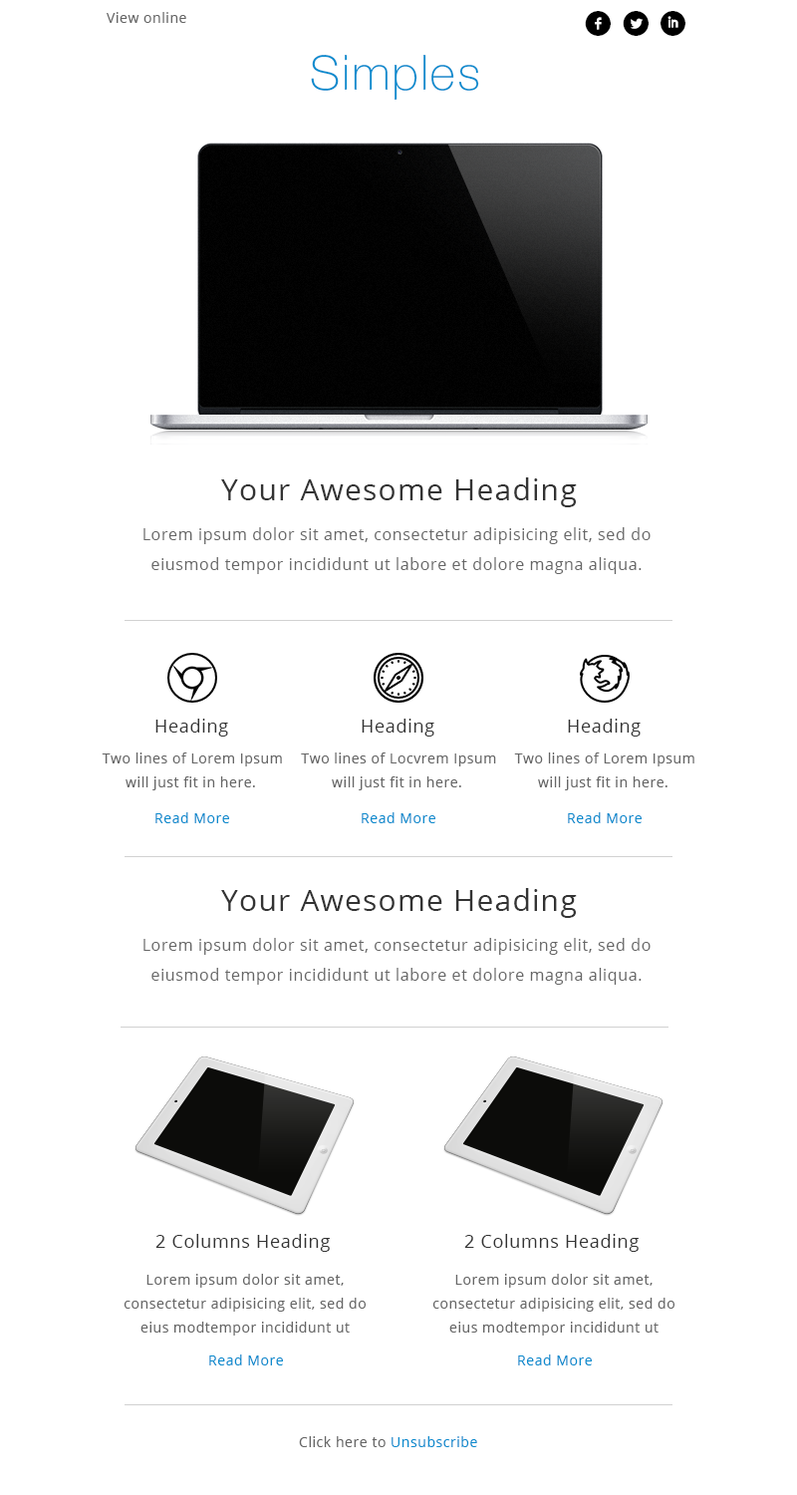
<style>
.page{position:relative;width:797px;height:1495px;background:#ffffff}
.page>*{position:absolute;margin:0}
.t1{font:14px "OpenSans";letter-spacing:0.04em;color:#666666}
.t2{font:35.9px "Socialico";letter-spacing:0.04em;color:#000000}
.t3{font:47.8px "HelveticaNeueLTStd-Th";letter-spacing:0.04em;color:#0a8cce}
.t4{font:29.9px "OpenSans";letter-spacing:0.04em;color:#333333}
.t5{font:15.9px/29.9px "OpenSans";letter-spacing:0.04em;color:#666666}
.t6{font:17.9px "OpenSans";letter-spacing:0.04em;color:#333333}
.t7{font:14px/23.9px "OpenSans";letter-spacing:0.04em;color:#666666}
.t8{font:14px "OpenSans";letter-spacing:0.04em;color:#0a8cce}
</style>
<div class="page">
<p class="t1" style="left:107px;top:12px;width:79px;height:11px">View online</p>
<p class="t2" style="left:585px;top:11px;width:26px;height:25px">f</p>
<p class="t2" style="left:623px;top:11px;width:26px;height:25px">l</p>
<p class="t2" style="left:661px;top:11px;width:25px;height:25px">i</p>
<p class="t3" style="left:311px;top:55px;width:168px;height:45px">Simples</p>
<p class="t4" style="left:221px;top:477px;width:356px;height:30px">Your Awesome Heading</p>
<p class="t5" style="left:144px;top:527px;width:507px;height:47px;text-align:center">Lorem ipsum dolor sit amet, consectetur adipisicing elit, sed do eiusmod tempor incididunt ut labore et dolore magna aliqua.</p>
<p class="t6" style="left:156px;top:719px;width:72px;height:18px">Heading</p>
<p class="t6" style="left:362px;top:719px;width:73px;height:18px">Heading</p>
<p class="t6" style="left:568px;top:719px;width:73px;height:18px">Heading</p>
<p class="t7" style="left:102px;top:753px;width:180px;height:37px;text-align:center">Two lines of Lorem Ipsum<br>will just fit in here.</p>
<p class="t7" style="left:301px;top:753px;width:195px;height:37px;text-align:center">Two lines of Locvrem Ipsum<br>will just fit in here.</p>
<p class="t7" style="left:514px;top:753px;width:181px;height:37px;text-align:center">Two lines of Lorem Ipsum<br>will just fit in here.</p>
<p class="t8" style="left:156px;top:812px;width:73px;height:11px">Read More</p>
<p class="t8" style="left:362px;top:812px;width:74px;height:11px">Read More</p>
<p class="t8" style="left:568px;top:812px;width:74px;height:11px">Read More</p>
<p class="t4" style="left:221px;top:888px;width:356px;height:30px">Your Awesome Heading</p>
<p class="t5" style="left:144px;top:938px;width:507px;height:47px;text-align:center">Lorem ipsum dolor sit amet, consectetur adipisicing elit, sed do eiusmod tempor incididunt ut labore et dolore magna aliqua.</p>
<p class="t6" style="left:156px;top:1234px;width:174px;height:18px">2 Columns Heading</p>
<p class="t6" style="left:465px;top:1234px;width:174px;height:18px">2 Columns Heading</p>
<p class="t7" style="left:124px;top:1274px;width:242px;height:62px;text-align:center">Lorem ipsum dolor sit amet, consectetur adipisicing elit, sed do eius modtempor incididunt ut labore et dolore magna aliqua. Ut enim ad minim veniam,</p>
<p class="t7" style="left:433px;top:1274px;width:242px;height:62px;text-align:center">Lorem ipsum dolor sit amet, consectetur adipisicing elit, sed do eius modtempor incididunt ut labore et dolore magna aliqua. Ut enim ad minim veniam,</p>
<p class="t8" style="left:209px;top:1355px;width:74px;height:11px">Read More</p>
<p class="t8" style="left:518px;top:1355px;width:74px;height:11px">Read More</p>
<p class="t1" style="left:299px;top:1436px;width:178px;height:11px">Click here to <span class="t8">Unsubscribe</span></p>
</div>
